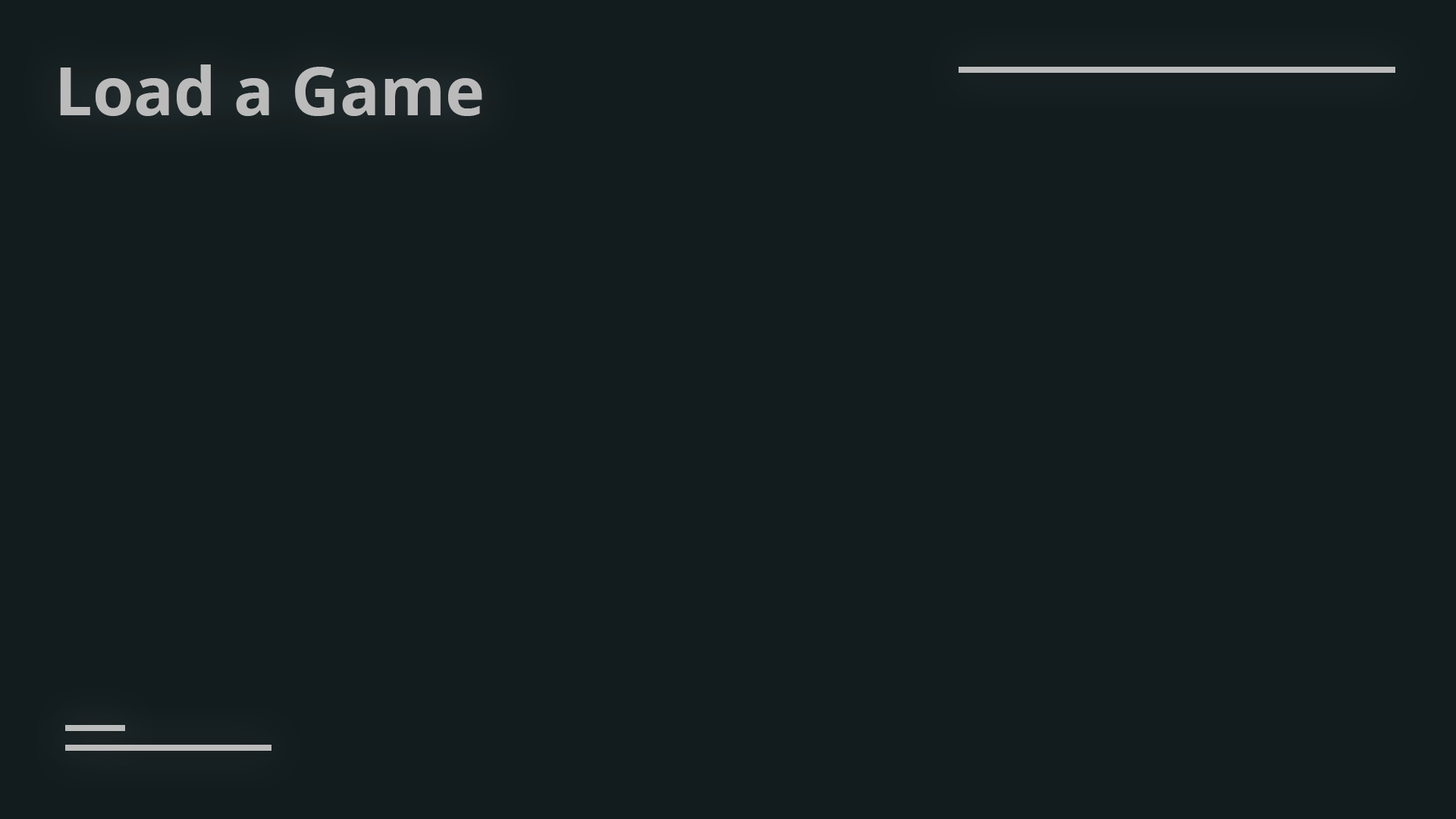
<style>
.page{position:relative;width:1456px;height:819px;background:#121b1d}
.page>*{position:absolute;margin:0}
.t1{font:66.7px "NotoSans-Bold";color:#bbbbbb}
</style>
<div class="page">
<p class="t1" style="left:60px;top:64px;width:422px;height:52px">Load a Game</p>
</div>
